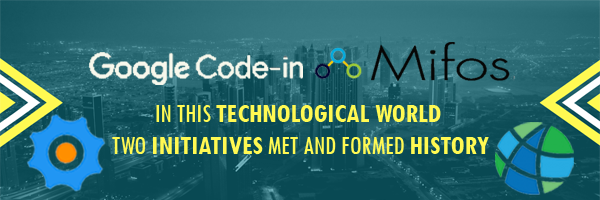
<style>
.page{position:relative;width:600px;height:200px}
.page>*{position:absolute;margin:0}
.t1{font:26.5px "TwCenMT-CondensedBold";color:#fff952}
.t2{font:26.5px "TwCenMT-Condensed";color:#fff952}
</style>
<div class="page">
<p class="t1" style="left:112px;top:105px;width:377px;height:49px;text-align:center"><span class="t2">IN THIS </span>TECHNOLOGICAL WORLD<span class="t2"> <br>TWO </span>INITIATIVES<span class="t2"> MET AND FORMED </span>HISTORY</p>
</div>
